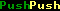
<style>
.page{position:relative;width:60px;height:11px;background:#000000}
.page>*{position:absolute;margin:0}
.t1{font:13.2px "Onesize";color:#009900;scale:0.91 1}
.t2{font:13.2px "Onesize";color:#ffff66;scale:0.91 1}
</style>
<div class="page">
<p class="t1" style="left:0px;top:1px;width:30px;height:8px">Push</p>
<p class="t2" style="left:30px;top:1px;width:30px;height:8px">Push</p>
</div>
